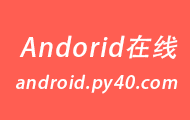
<style>
.page{position:relative;width:190px;height:120px;background:#ff5e52}
.page>*{position:absolute;margin:0}
.t1{font:26px "AdobeHeitiStd-Regular";letter-spacing:0.05em;color:#ffffff;font-style:italic}
.t2{font:18px "AdobeHeitiStd-Regular";letter-spacing:0.05em;color:#ffffff;font-style:italic}
</style>
<div class="page">
<p class="t1" style="left:19px;top:34px;width:159px;height:25px">Andorid在线</p>
<p class="t2" style="left:16px;top:74px;width:162px;height:20px">android.py40.com</p>
</div>
